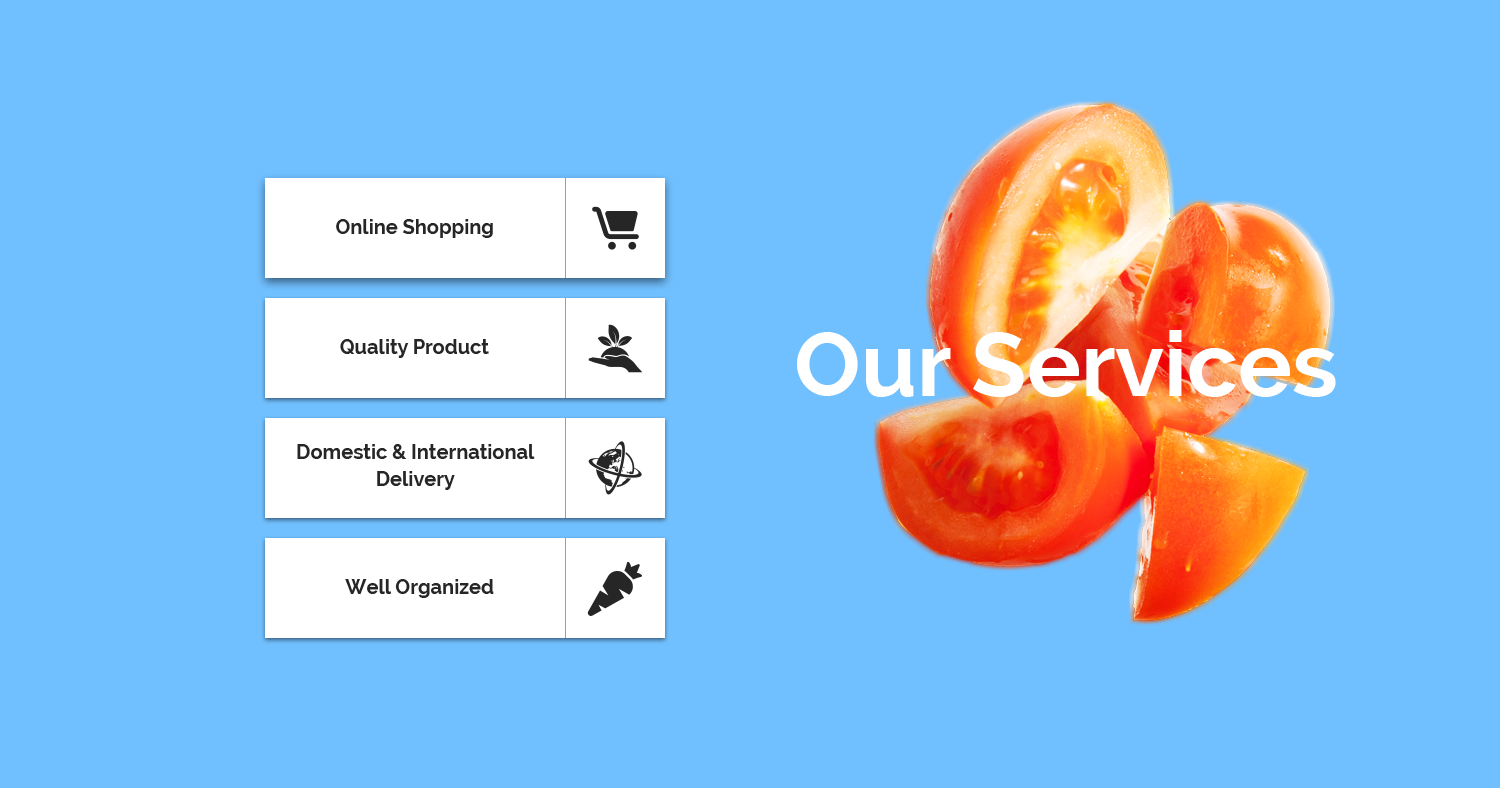
<style>
.page{position:relative;width:1500px;height:788px;background:#70bfff}
.page>*{position:absolute;margin:0}
.t1{font:20px "Raleway-Bold";color:#262626}
.t2{font:90px "Raleway-Bold";color:#ffffff}
.t3{font:20px/27px "Raleway-Bold";color:#262626}
</style>
<div class="page">
<p class="t1" style="left:336px;top:219px;width:157px;height:19px">Online Shopping</p>
<p class="t1" style="left:340px;top:339px;width:149px;height:19px">Quality Product</p>
<p class="t2" style="left:797px;top:330px;width:539px;height:67px">Our Services</p>
<p class="t3" style="left:297px;top:444px;width:238px;height:46px;text-align:center">Domestic &amp; International Delivery</p>
<p class="t1" style="left:345px;top:579px;width:149px;height:19px">Well Organized</p>
</div>
